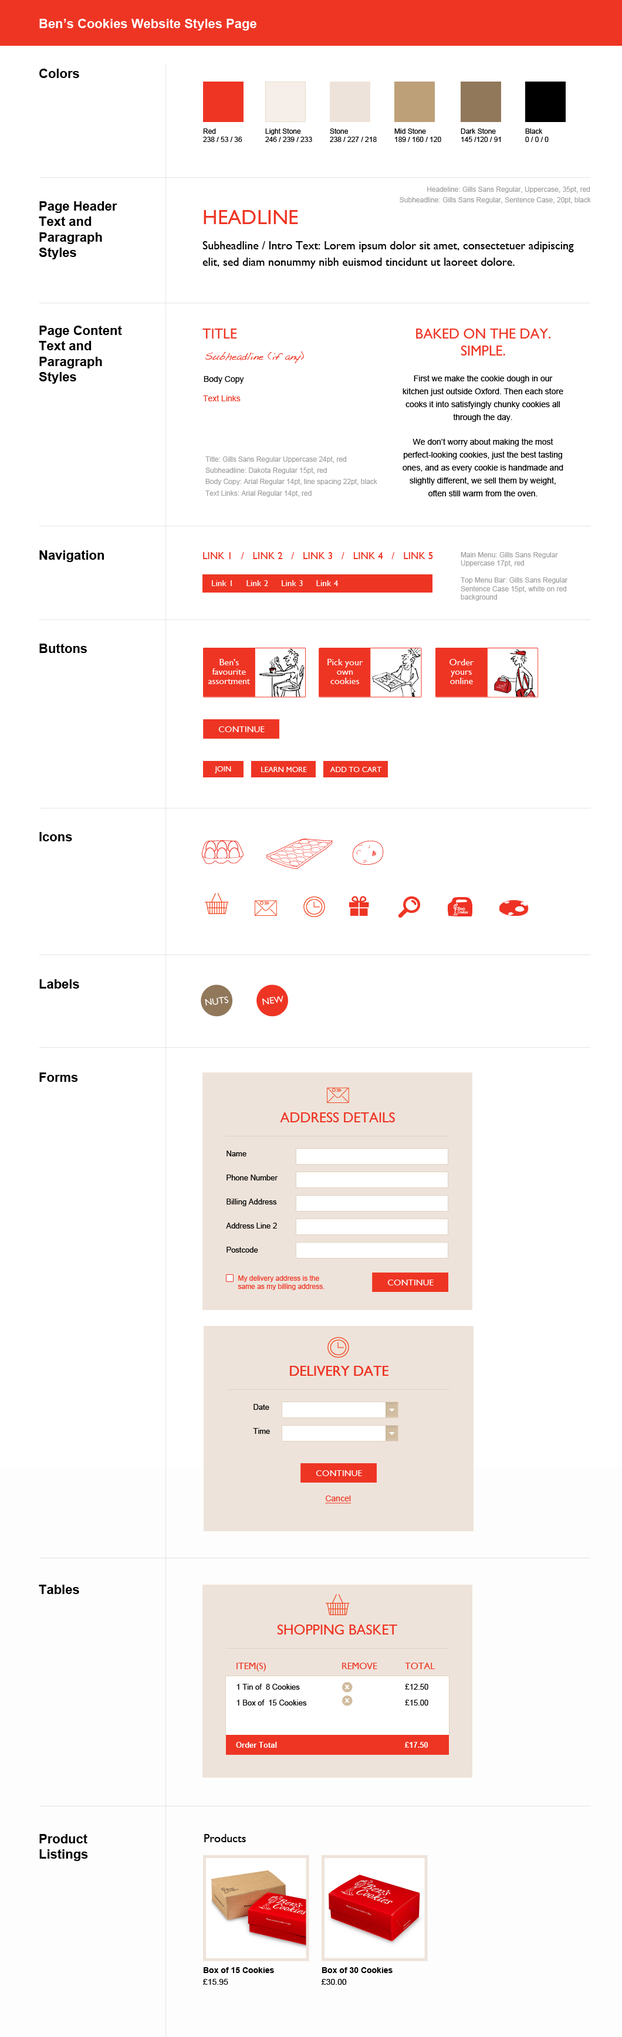
<style>
.page{position:relative;width:622px;height:2037px;background:#ffffff}
.page>*{position:absolute;margin:0}
.t1{font:12.9px "Arial-BoldMT";color:#ffffff}
.t2{font:12.9px "Arial-BoldMT";color:#000000}
.t3{font:7px "ArialMT";color:#000000}
.t4{font:7px "ArialMT";color:#a1a1a1}
.t5{font:11.7px/16.4px "GillSans";color:#000000}
.t6{font:20.5px "GillSans";color:#ee3524;text-transform:uppercase}
.t7{font:14.1px "GillSans";color:#ee3524;text-transform:uppercase}
.t8{font:8.8px "Dakota";color:#ee3524}
.t9{font:8.2px "ArialMT";color:#000000}
.t10{font:8.2px/12.9px "ArialMT";color:#000000}
.t11{font:8.2px "ArialMT";color:#ee3524}
.t12{font:10px "GillSans";letter-spacing:0.01em;color:#ee3524;text-transform:uppercase}
.t13{font:8.8px "GillSans";letter-spacing:0.01em;color:#ffffff}
.t14{font:9.4px/9.4px "GillSans";color:#ffffff}
.t15{font:9.4px/9.4px "GillSans";letter-spacing:-0.01em;color:#ffffff}
.t16{font:9px "GillSans";color:#ffffff;text-transform:uppercase}
.t17{font:7.6px "GillSans";color:#ffffff;text-transform:uppercase}
.t18{font:9.4px "GillSans";color:#ffffff}
.t19{font:7.6px/24.1px "ArialMT";color:#000000}
.t20{font:7px "ArialMT";color:#ee3524}
.t21{font:8.2px "ArialMT";color:#ee3524;text-decoration:underline}
.t22{font:9.4px "GillSans";color:#ee3524;text-transform:uppercase}
.t23{font:7.6px/15.8px "ArialMT";color:#000000}
.t24{font:7.6px "GillSans-Bold";color:#ffffff}
.t25{font:7.6px "Arial-BoldMT";color:#ffffff}
.t26{font:11.7px "GillSans";color:#000000}
.t27{font:8.2px "Arial-BoldMT";color:#000000}
</style>
<div class="page">
<p class="t1" style="left:39px;top:19px;width:217px;height:12px">Ben’s Cookies Website Styles Page</p>
<p class="t2" style="left:39px;top:69px;width:40px;height:9px">Colors</p>
<p class="t3" style="left:203px;top:128px;width:39px;height:14px">Red<br>238 / 53 / 36</p>
<p class="t3" style="left:265px;top:128px;width:47px;height:14px">Light Stone<br>246 / 239 / 233</p>
<p class="t3" style="left:330px;top:128px;width:47px;height:14px">Stone<br>238 / 227 / 218</p>
<p class="t3" style="left:394px;top:128px;width:47px;height:14px">Mid Stone<br>189 / 160 / 120</p>
<p class="t3" style="left:461px;top:128px;width:40px;height:14px">Dark Stone<br>145 /120 / 91</p>
<p class="t3" style="left:525px;top:128px;width:24px;height:14px">Black<br>0 / 0 / 0</p>
<p class="t4" style="left:400px;top:197px;width:191px;height:7px">Subheadline: Gills Sans Regular, Sentence Case, 20pt, black</p>
<p class="t4" style="left:427px;top:187px;width:163px;height:6px">Headeline: Gills Sans Regular, Uppercase, 35pt, red</p>
<p class="t2" style="left:39px;top:201px;width:78px;height:58px">Page Header Text and<br>Paragraph<br>Styles</p>
<p class="t5" style="left:202px;top:210px;width:372px;height:59px"><span class="t6">headline<br></span>Subheadline / Intro Text: Lorem ipsum dolor sit amet, consectetuer adipiscing elit, sed diam nonummy nibh euismod tincidunt ut laoreet dolore.</p>
<p class="t2" style="left:39px;top:326px;width:83px;height:58px">Page Content Text and<br>Paragraph<br>Styles</p>
<p class="t7" style="left:202px;top:329px;width:35px;height:10px">title</p>
<p class="t7" style="left:416px;top:329px;width:135px;height:27px;text-align:center">Baked on the day. Simple.</p>
<p class="t8" style="left:205px;top:351px;width:99px;height:12px">Subheadline (if any)</p>
<p class="t9" style="left:204px;top:376px;width:40px;height:8px">Body Copy</p>
<p class="t10" style="left:402px;top:375px;width:161px;height:121px;text-align:center">First we make the cookie dough in our kitchen just outside Oxford. Then each store cooks it into satisfyingly chunky cookies all through the day.<br>We don’t worry about making the most perfect-looking cookies, just the best tasting ones, and as every cookie is handmade and slightly different, we sell them by weight, often still warm from the oven.</p>
<p class="t11" style="left:203px;top:395px;width:38px;height:6px">Text Links</p>
<p class="t4" style="left:205px;top:456px;width:172px;height:41px">Title: Gills Sans Regular Uppercase 24pt, red<br>Subheadline: Dakota Regular 15pt, red<br>Body Copy: Arial Regular 14pt, line spacing 22pt, black<br>Text Links: Arial Regular 14pt, red</p>
<p class="t2" style="left:39px;top:550px;width:65px;height:12px">Navigation</p>
<p class="t12" style="left:203px;top:552px;width:230px;height:7px">LINK 1   /   LINK 2   /   LINK 3   /   LINK 4   /   LINK 5</p>
<p class="t4" style="left:461px;top:552px;width:107px;height:49px">Main Menu: Gills Sans Regular Uppercase 17pt, red<br>Top Menu Bar: Gills Sans Regular Sentence Case 15pt, white on red background</p>
<p class="t13" style="left:212px;top:580px;width:126px;height:6px">Link 1     Link 2     Link 3     Link 4</p>
<p class="t2" style="left:39px;top:644px;width:48px;height:9px">Buttons</p>
<p class="t14" style="left:208px;top:659px;width:43px;height:25px;text-align:center">Ben's favourite <span class="t15">assortment</span></p>
<p class="t14" style="left:327px;top:659px;width:36px;height:25px;text-align:center">Pick your<br>own<br>cookies</p>
<p class="t14" style="left:449px;top:659px;width:25px;height:25px;text-align:center">Order<br>yours<br>online</p>
<p class="t16" style="left:218px;top:726px;width:47px;height:6px">continue</p>
<p class="t17" style="left:214px;top:766px;width:17px;height:7px">Join</p>
<p class="t17" style="left:261px;top:767px;width:46px;height:5px">LEARN MORE</p>
<p class="t17" style="left:330px;top:767px;width:52px;height:5px">ADD TO CART</p>
<p class="t2" style="left:39px;top:832px;width:33px;height:9px">Icons</p>
<p class="t2" style="left:39px;top:979px;width:40px;height:10px">Labels</p>
<p class="t18" style="left:205px;top:996px;width:24px;height:10px;rotate:-7deg">NUTS</p>
<p class="t18" style="left:262px;top:996px;width:21px;height:9px;rotate:-7deg">NEW</p>
<p class="t2" style="left:39px;top:1072px;width:39px;height:10px">Forms</p>
<p class="t7" style="left:280px;top:1112px;width:115px;height:10px">ADDRESS DETAILS</p>
<p class="t19" style="left:226px;top:1150px;width:52px;height:103px">Name<br>Phone Number<br>Billing Address<br>Address Line 2<br>Postcode</p>
<p class="t20" style="left:238px;top:1275px;width:86px;height:15px">My delivery address is the same as my billing address.</p>
<p class="t16" style="left:387px;top:1280px;width:47px;height:5px">continue</p>
<p class="t7" style="left:290px;top:1366px;width:98px;height:10px">DELIVERY DATE</p>
<p class="t7" style="left:290px;top:1366px;width:98px;height:10px">DELIVERY DATE</p>
<p class="t19" style="left:253px;top:1404px;width:17px;height:30px">Date<br>Time</p>
<p class="t16" style="left:316px;top:1470px;width:46px;height:6px">continue</p>
<p class="t21" style="left:325px;top:1495px;width:26px;height:9px">Cancel</p>
<p class="t2" style="left:39px;top:1585px;width:40px;height:9px">Tables</p>
<p class="t7" style="left:277px;top:1624px;width:120px;height:10px">Shopping Basket</p>
<p class="t22" style="left:236px;top:1663px;width:199px;height:8px">Item(s)    Remove  Total</p>
<p class="t23" style="left:236px;top:1684px;width:192px;height:21px">1 Tin of  8 Cookies     £12.50<br>1 Box of  15 Cookies     £15.00</p>
<p class="t24" style="left:344px;top:1685px;width:6px;height:4px">x</p>
<p class="t24" style="left:344px;top:1698px;width:6px;height:4px">x</p>
<p class="t25" style="left:236px;top:1742px;width:192px;height:6px">Order Total       £17.50</p>
<p class="t2" style="left:39px;top:1834px;width:49px;height:27px">Product Listings</p>
<p class="t26" style="left:204px;top:1834px;width:42px;height:8px">Products</p>
<p class="t27" style="left:203px;top:1967px;width:71px;height:18px">Box of 15 Cookies<br><span class="t9">£15.95</span></p>
<p class="t27" style="left:321px;top:1967px;width:71px;height:18px">Box of 30 Cookies<br><span class="t9">£30.00</span></p>
</div>
